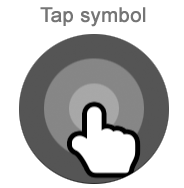
<style>
.page{position:relative;width:184px;height:188px;background:#ffffff}
.page>*{position:absolute;margin:0}
.t1{font:20px "ArialMT";color:#757575;font-weight:bold}
</style>
<div class="page">
<p class="t1" style="left:40px;top:7px;width:106px;height:20px">Tap symbol</p>
</div>
